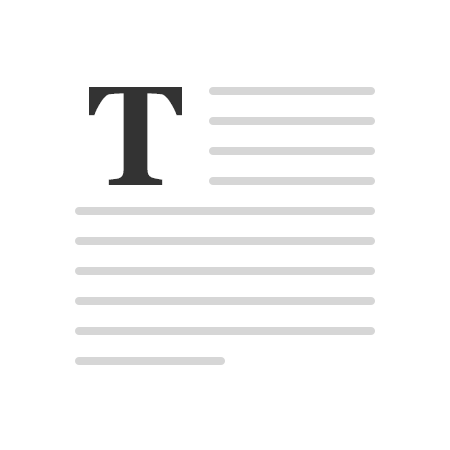
<style>
.page{position:relative;width:450px;height:450px;background:#ffffff}
.page>*{position:absolute;margin:0}
.t1{font:141px "Georgia-Bold";color:#333333}
</style>
<div class="page">
<p class="t1" style="left:89px;top:87px;width:93px;height:98px">T</p>
</div>
